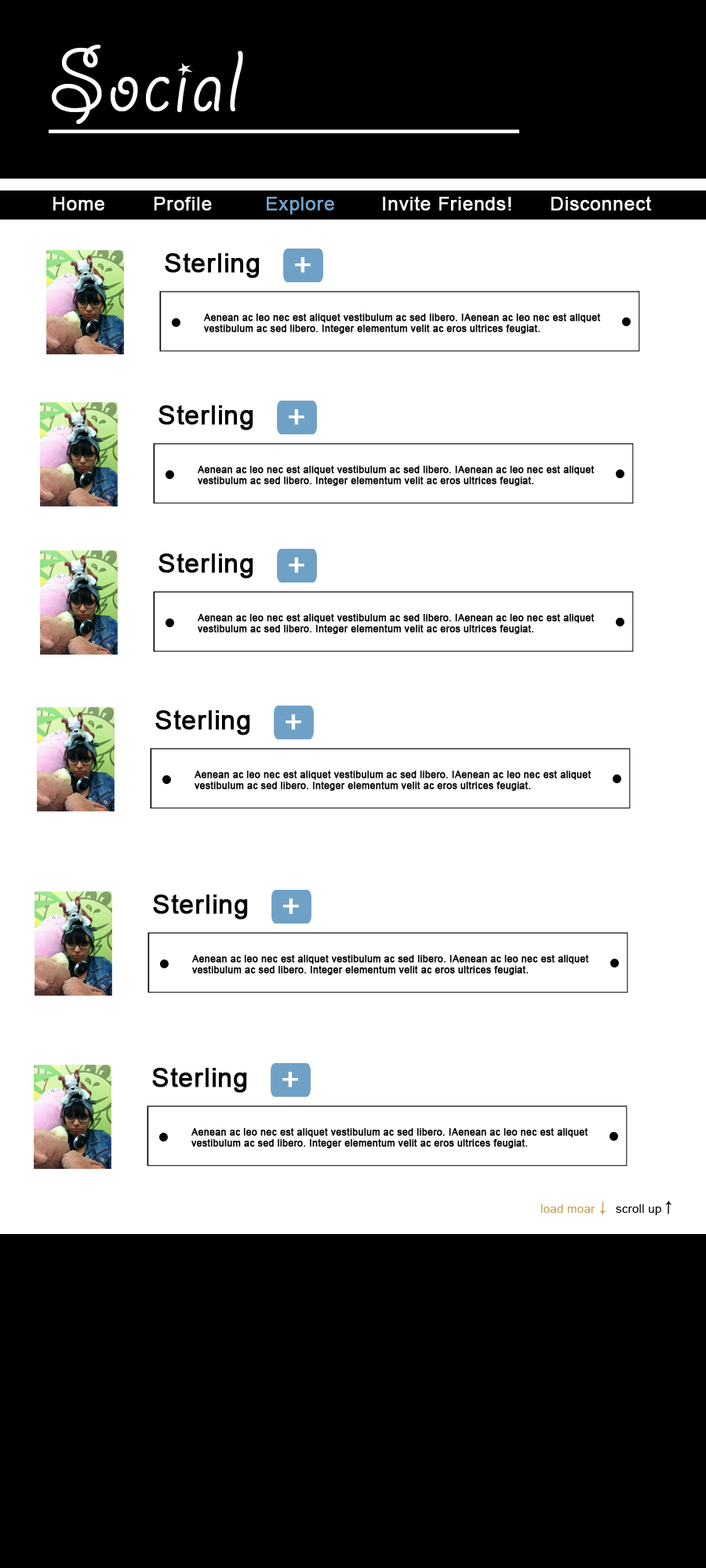
<style>
.page{position:relative;width:706px;height:1568px;background:#ffffff}
.page>*{position:absolute;margin:0}
.t1{font:97.2px "GiddyupStd";letter-spacing:0.02em;color:#ffffff}
.t2{font:18.8px "ArialMT";letter-spacing:0.02em;color:#ffffff;font-weight:bold}
.t3{font:18.8px "ArialMT";letter-spacing:0.02em;color:#fbfbfb;font-weight:bold}
.t4{font:18.8px "ArialMT";letter-spacing:0.02em;color:#6fa1c7;font-weight:bold}
.t5{font:25.9px "ArialMT";letter-spacing:0.02em;color:#050505;font-weight:bold}
.t6{font:30.6px "ArialMT";letter-spacing:0.02em;color:#ffffff;font-weight:bold}
.t7{font:9.4px "ArialMT";letter-spacing:0.02em;color:#000000;font-weight:bold}
.t8{font:11.8px "ArialMT";letter-spacing:0.02em;color:#cb9d4e}
.t9{font:11.8px "ArialMT";letter-spacing:0.02em;color:#000000}
</style>
<div class="page">
<p class="t1" style="left:52px;top:45px;width:191px;height:80px">Social</p>
<p class="t2" style="left:53px;top:197px;width:51px;height:14px">Home</p>
<p class="t3" style="left:154px;top:197px;width:58px;height:14px">Profile</p>
<p class="t4" style="left:267px;top:197px;width:67px;height:18px">Explore</p>
<p class="t2" style="left:383px;top:196px;width:128px;height:15px">Invite Friends!</p>
<p class="t2" style="left:550px;top:196px;width:102px;height:15px">Disconnect</p>
<p class="t5" style="left:165px;top:253px;width:95px;height:25px">Sterling</p>
<p class="t6" style="left:295px;top:257px;width:15px;height:16px">+</p>
<p class="t7" style="left:204px;top:314px;width:397px;height:20px">Aenean ac leo nec est aliquet vestibulum ac sed libero. IAenean ac leo nec est aliquet vestibulum ac sed libero. Integer elementum velit ac eros ultrices feugiat.</p>
<p class="t5" style="left:158px;top:405px;width:95px;height:25px">Sterling</p>
<p class="t6" style="left:289px;top:409px;width:15px;height:16px">+</p>
<p class="t7" style="left:198px;top:466px;width:396px;height:20px">Aenean ac leo nec est aliquet vestibulum ac sed libero. IAenean ac leo nec est aliquet vestibulum ac sed libero. Integer elementum velit ac eros ultrices feugiat.</p>
<p class="t5" style="left:158px;top:554px;width:95px;height:25px">Sterling</p>
<p class="t6" style="left:289px;top:557px;width:15px;height:16px">+</p>
<p class="t7" style="left:198px;top:614px;width:396px;height:20px">Aenean ac leo nec est aliquet vestibulum ac sed libero. IAenean ac leo nec est aliquet vestibulum ac sed libero. Integer elementum velit ac eros ultrices feugiat.</p>
<p class="t5" style="left:155px;top:710px;width:95px;height:25px">Sterling</p>
<p class="t6" style="left:285px;top:714px;width:16px;height:16px">+</p>
<p class="t7" style="left:194px;top:771px;width:397px;height:20px">Aenean ac leo nec est aliquet vestibulum ac sed libero. IAenean ac leo nec est aliquet vestibulum ac sed libero. Integer elementum velit ac eros ultrices feugiat.</p>
<p class="t5" style="left:153px;top:895px;width:95px;height:25px">Sterling</p>
<p class="t6" style="left:283px;top:898px;width:16px;height:16px">+</p>
<p class="t7" style="left:192px;top:955px;width:397px;height:20px">Aenean ac leo nec est aliquet vestibulum ac sed libero. IAenean ac leo nec est aliquet vestibulum ac sed libero. Integer elementum velit ac eros ultrices feugiat.</p>
<p class="t5" style="left:152px;top:1068px;width:95px;height:25px">Sterling</p>
<p class="t6" style="left:282px;top:1072px;width:16px;height:15px">+</p>
<p class="t7" style="left:191px;top:1128px;width:397px;height:21px">Aenean ac leo nec est aliquet vestibulum ac sed libero. IAenean ac leo nec est aliquet vestibulum ac sed libero. Integer elementum velit ac eros ultrices feugiat.</p>
<p class="t8" style="left:540px;top:1204px;width:55px;height:9px">load moar</p>
<p class="t9" style="left:615px;top:1204px;width:46px;height:11px">scroll up</p>
</div>
